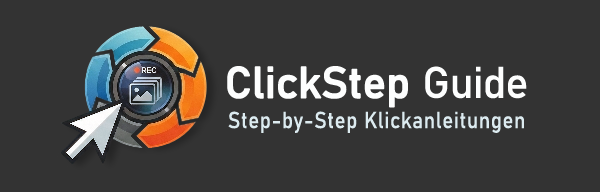
<style>
.page{position:relative;width:600px;height:192px;background:#333333}
.page>*{position:absolute;margin:0}
.t1{font:43.4px "Bahnschrift";letter-spacing:-0.02em;color:#fdfefe;font-weight:bold}
.t2{font:43.4px "Bahnschrift";letter-spacing:-0.02em;color:#fdfefe}
.t3{font:22.9px "Bahnschrift";letter-spacing:0.03em;color:#dcebf0;scale:0.89 1}
</style>
<div class="page">
<p class="t1" style="left:227px;top:66px;width:300px;height:42px">ClickStep <span class="t2">Guide</span></p>
<p class="t3" style="left:228px;top:111px;width:296px;height:22px">Step-by-Step Klickanleitungen</p>
</div>
